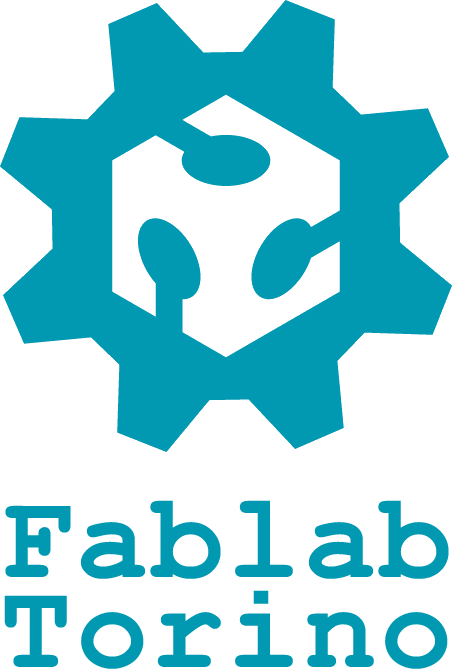
<style>
.page{position:relative;width:452px;height:669px;background:#ffffff}
.page>*{position:absolute;margin:0}
.t1{font:120px/90px "CourierNewPS-BoldMT";color:#0199b1}
</style>
<div class="page">
<p class="t1" style="left:4px;top:500px;width:445px;height:169px;text-align:justify">Fablab<br>Torino</p>
</div>
